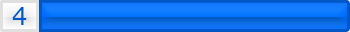
<style>
.page{position:relative;width:350px;height:32px}
.page>*{position:absolute;margin:0}
.t1{font:24px "Verdana";color:#0057c5}
</style>
<div class="page">
<p class="t1" style="left:12px;top:7px;width:15px;height:18px">4</p>
</div>
